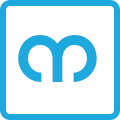
<style>
.page{position:relative;width:120px;height:120px;background:#ffffff}
.page>*{position:absolute;margin:0}
.t1{font:104.9px "TierraNegra";color:#1da9dd}
</style>
<div class="page">
<p class="t1" style="left:18px;top:35px;width:79px;height:47px">m</p>
</div>
